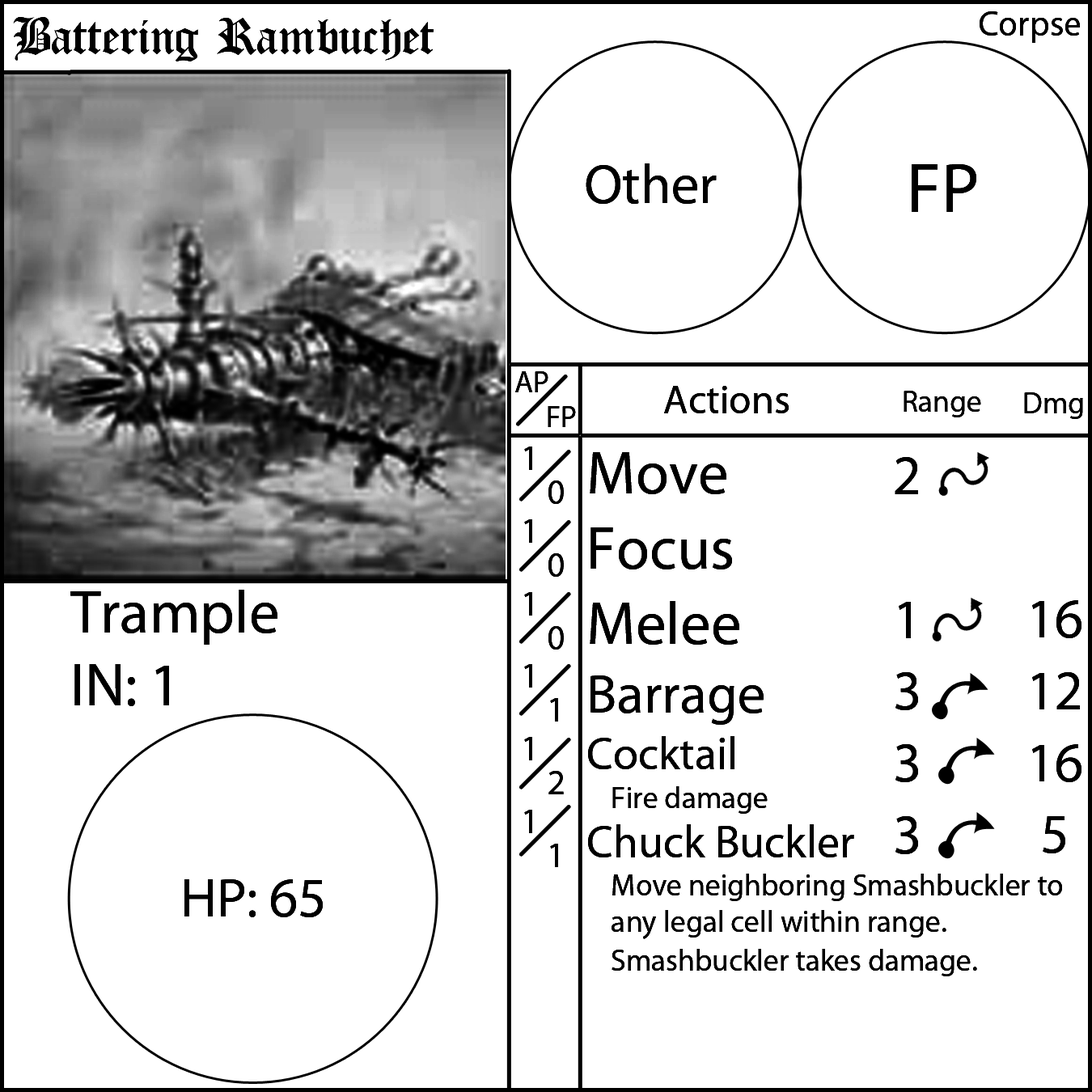
<style>
.page{position:relative;width:1092px;height:1092px;background:#ffffff}
.page>*{position:absolute;margin:0}
.t1{font:55.6px "OldLondon";color:#000000}
.t2{font:55.6px "MyriadPro-Regular";color:#000000}
.t3{font:70.8px "MyriadPro-Regular";color:#000000}
.t4{font:30.3px "MyriadPro-Regular";color:#000000}
.t5{font:40.4px "MyriadPro-Regular";color:#000000}
.t6{font:35.4px "MyriadPro-Regular";color:#000000}
.t7{font:60.7px "MyriadPro-Regular";color:#000000}
.t8{font:45.5px "MyriadPro-Regular";color:#000000}
</style>
<div class="page">
<p class="t1" style="left:13px;top:17px;width:421px;height:44px">Battering Rambuchet</p>
<p class="t2" style="left:586px;top:163px;width:131px;height:41px">Other</p>
<p class="t3" style="left:912px;top:164px;width:64px;height:48px">FP</p>
<p class="t4" style="left:515px;top:371px;width:33px;height:21px">AP</p>
<p class="t5" style="left:664px;top:386px;width:125px;height:27px">Actions</p>
<p class="t4" style="left:904px;top:391px;width:77px;height:26px">Range</p>
<p class="t4" style="left:1024px;top:392px;width:59px;height:27px">Dmg</p>
<p class="t4" style="left:548px;top:406px;width:28px;height:21px">FP</p>
<p class="t6" style="left:524px;top:447px;width:8px;height:386px">1<br>1<br>1<br>1<br>1<br>1</p>
<p class="t4" style="left:588px;top:452px;width:474px;height:524px"><span class="t7">Move<br>Focus<br>Melee<br></span><span class="t2">Barrage<br></span><span class="t8">Cocktail<br></span> Fire damage<br><span class="t8">Chuck Buckler<br></span> Move neighboring Smashbuckler to    any legal cell within range.  <br> Smashbuckler takes damage.</p>
<p class="t2" style="left:895px;top:457px;width:23px;height:397px;text-align:center">2<br><br>1<br>3<br>3<br>3</p>
<p class="t6" style="left:548px;top:480px;width:16px;height:387px">0<br>0<br>0<br>1<br>2<br>1</p>
<p class="t7" style="left:70px;top:590px;width:207px;height:116px">Trample<br>IN: 1</p>
<p class="t2" style="left:1032px;top:600px;width:49px;height:253px;text-align:center">16<br>12<br>16<br>5</p>
<p class="t2" style="left:184px;top:879px;width:139px;height:38px">HP: 65</p>
</div>
